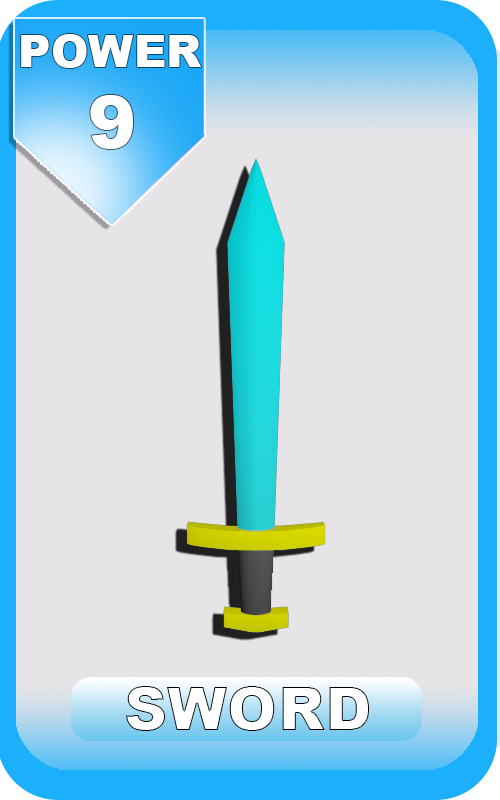
<style>
.page{position:relative;width:500px;height:800px;background:#e6e4e7}
.page>*{position:absolute;margin:0}
.t1{font:45px "Arial-Black";letter-spacing:0.01em;color:#ffffff}
.t2{font:72px "Arial-Black";letter-spacing:0.01em;color:#ffffff}
</style>
<div class="page">
<p class="t1" style="left:21px;top:34px;width:180px;height:34px">POWER</p>
<p class="t2" style="left:90px;top:95px;width:43px;height:54px">9</p>
</div>
